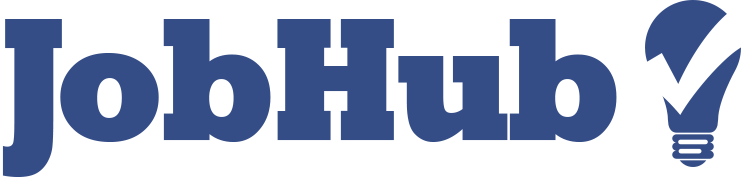
<style>
.page{position:relative;width:748px;height:183px;background:#ffffff}
.page>*{position:absolute;margin:0}
.t1{font:177.6px "Rockwell-ExtraBold";letter-spacing:-0.04em;color:#354d87;scale:0.83 1}
</style>
<div class="page">
<p class="t1" style="left:2px;top:19px;width:615px;height:158px">JobHub</p>
</div>
